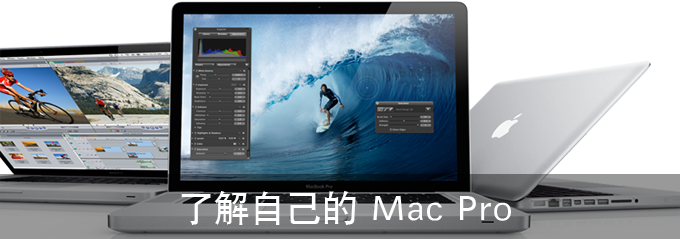
<style>
.page{position:relative;width:680px;height:239px;background:#ffffff}
.page>*{position:absolute;margin:0}
.t1{font:36px "SIL-Hei-Med-Jian";color:#ffffff}
.t2{font:30px "AdobeHeitiStd-Regular";color:#ffffff}
</style>
<div class="page">
<p class="t1" style="left:181px;top:190px;width:330px;height:35px"><span class="t2">     </span> 了解自己的 Mac Pro</p>
</div>
